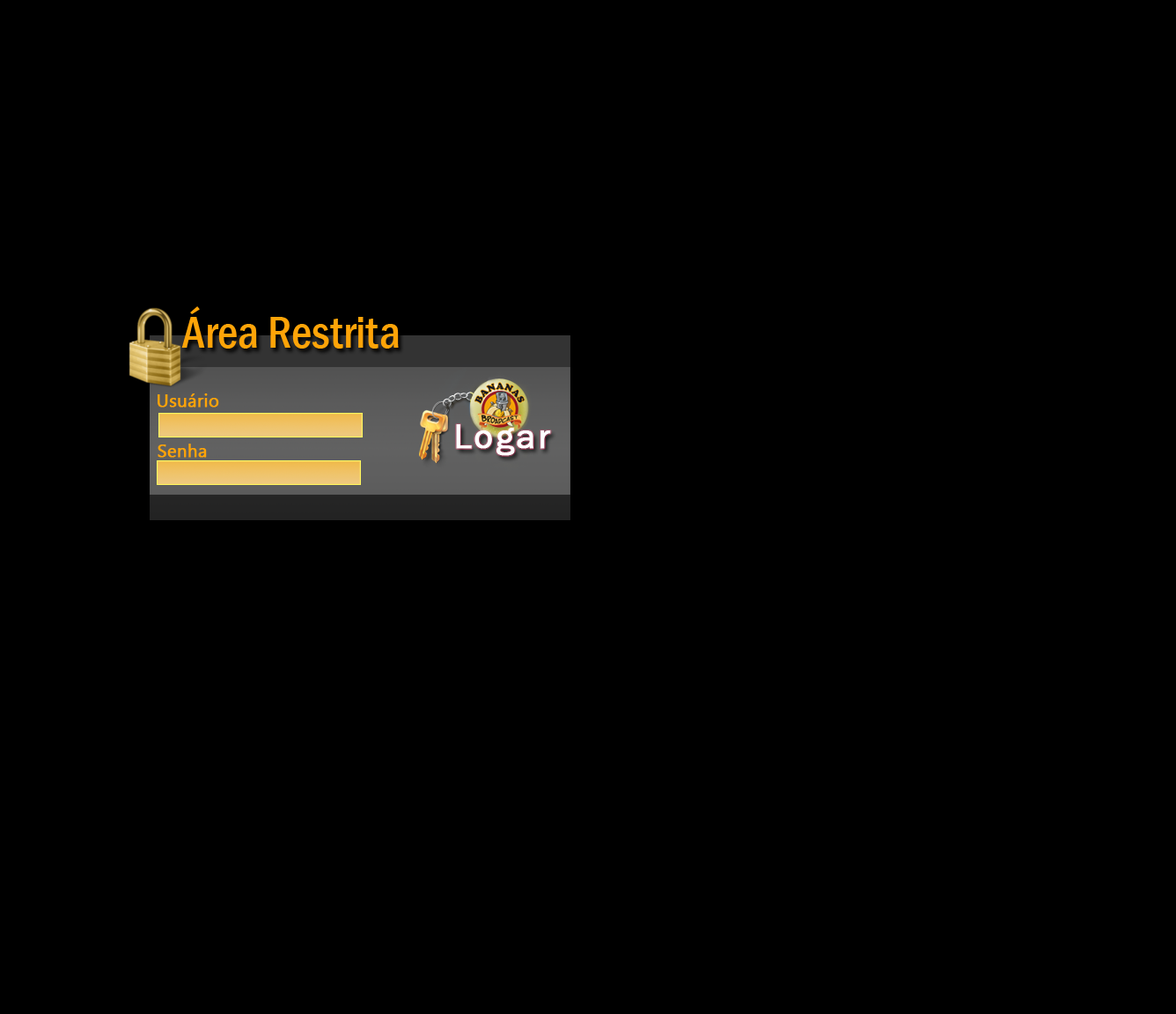
<style>
.page{position:relative;width:1176px;height:1014px;background:#000000}
.page>*{position:absolute;margin:0}
.t1{font:46.1px "FranklinGothic-MediumCond";color:#ffa408}
.t2{font:17.8px "MicrosoftNewTaiLue";color:#ffa408;font-weight:bold}
.t3{font:36px "FranklinGothic-Book";letter-spacing:0.05em;color:#ffffff;font-weight:bold}
</style>
<div class="page">
<p class="t1" style="left:181px;top:306px;width:218px;height:43px">Área Restrita</p>
<p class="t2" style="left:158px;top:393px;width:61px;height:15px">Usuário</p>
<p class="t3" style="left:456px;top:424px;width:95px;height:32px">Logar</p>
<p class="t2" style="left:158px;top:444px;width:49px;height:14px">Senha</p>
</div>
